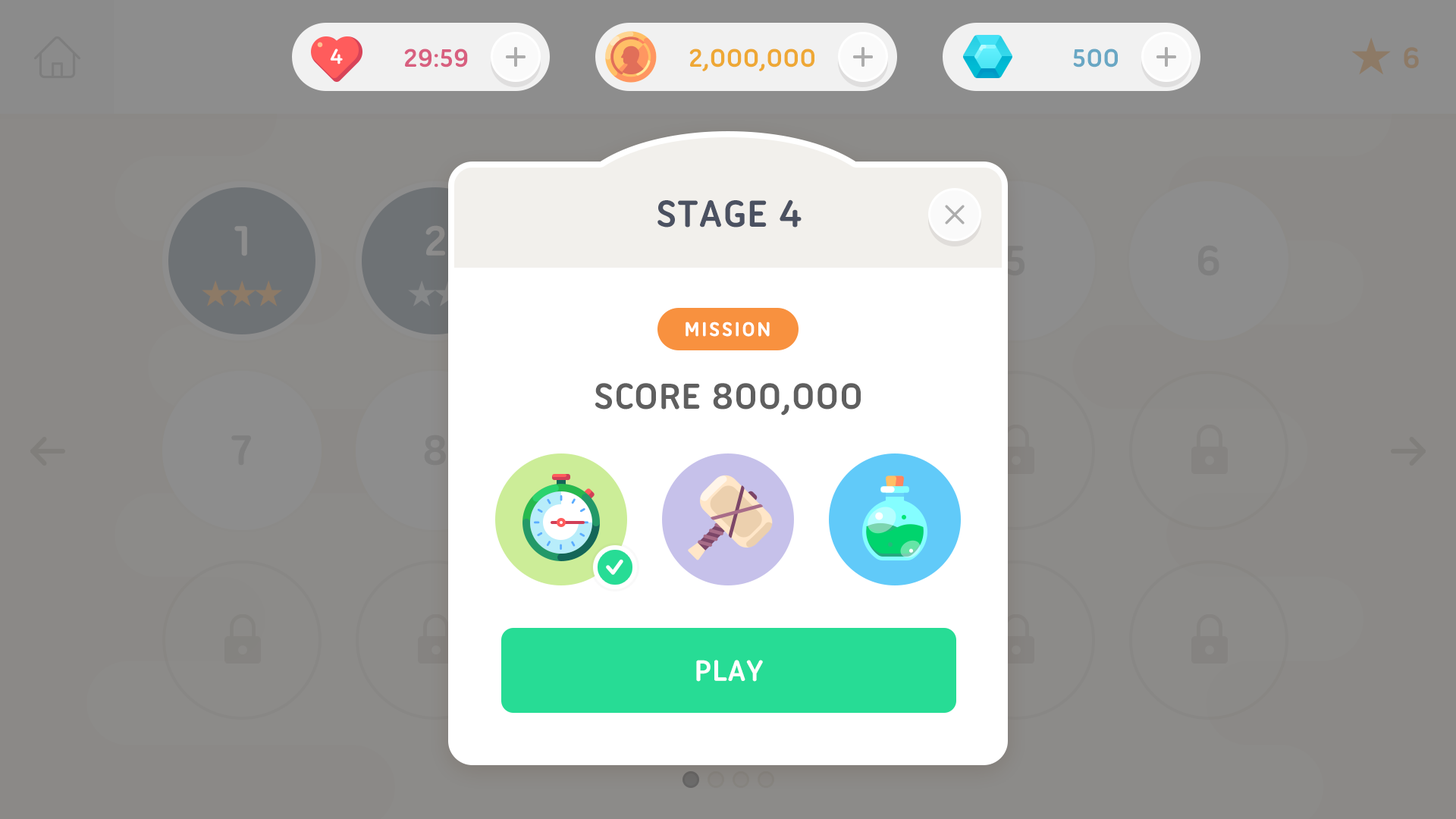
<style>
.page{position:relative;width:1456px;height:819px;background:#8c8b89}
.page>*{position:absolute;margin:0}
.t1{font:22.7px "UbuntuTitling-Bold";color:#ffffff;text-transform:uppercase}
.t2{font:27.3px "UbuntuTitling-Bold";color:#d85f7f;text-transform:uppercase}
.t3{font:27.3px "UbuntuTitling-Bold";color:#eea835;text-transform:uppercase}
.t4{font:27.3px "UbuntuTitling-Bold";color:#69a7c4;text-transform:uppercase}
.t5{font:40.9px "UbuntuTitling-Bold";color:#4b5161;text-transform:uppercase}
.t6{font:21.2px "UbuntuTitling-Bold";letter-spacing:0.08em;color:#ffffff;text-transform:uppercase}
.t7{font:39.2px "UbuntuTitling-Bold";color:#5f5f5f;text-transform:uppercase}
.t8{font:31.8px "UbuntuTitling-Bold";color:#ffffff;text-transform:uppercase}
</style>
<div class="page">
<p class="t1" style="left:330px;top:49px;width:13px;height:15px">4</p>
<p class="t2" style="left:404px;top:49px;width:64px;height:18px">29:59</p>
<p class="t3" style="left:689px;top:49px;width:125px;height:22px">2,000,000</p>
<p class="t4" style="left:1073px;top:49px;width:45px;height:18px">500</p>
<p class="t5" style="left:657px;top:199px;width:145px;height:28px">Stage 4</p>
<p class="t6" style="left:686px;top:322px;width:84px;height:15px">mission</p>
<p class="t7" style="left:595px;top:383px;width:266px;height:33px">score 800,000</p>
<p class="t8" style="left:696px;top:660px;width:67px;height:22px">play</p>
</div>
